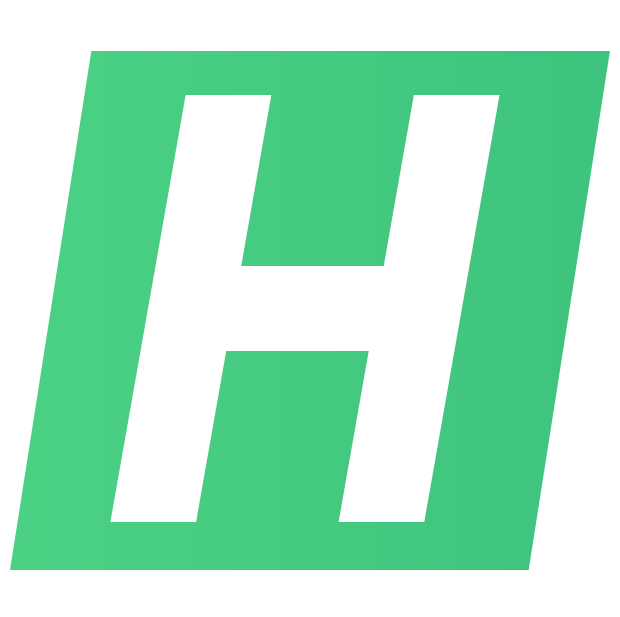
<style>
.page{position:relative;width:620px;height:617px;background:#ffffff}
.page>*{position:absolute;margin:0}
.t1{font:542.3px "LemonMilk";color:#ffffff;font-style:italic}
</style>
<div class="page">
<p class="t1" style="left:110px;top:95px;width:390px;height:427px">H</p>
</div>
